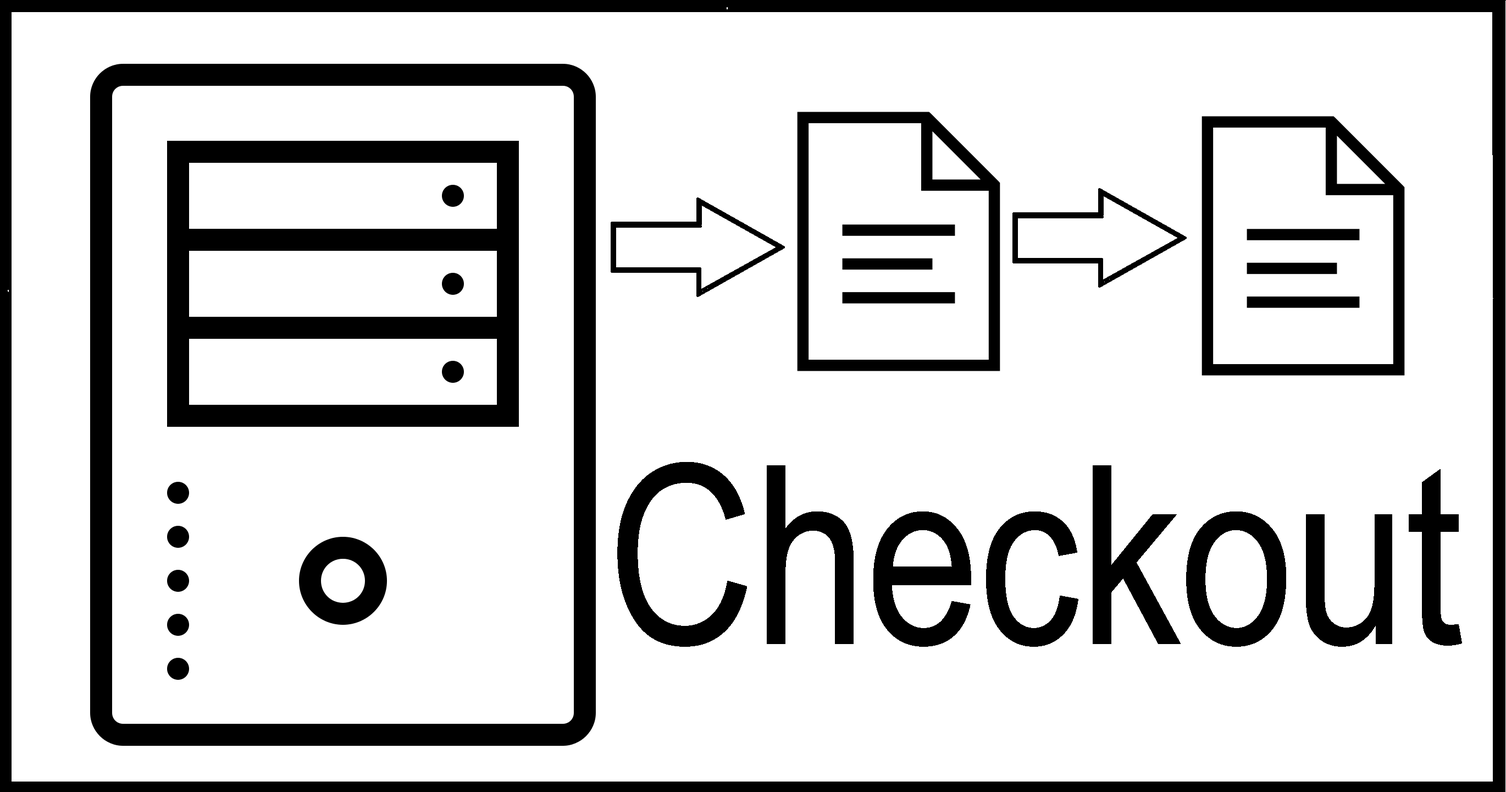
<style>
.page{position:relative;width:1506px;height:792px;background:#ffffff}
.page>*{position:absolute;margin:0}
.t1{font:249.1px "ArialNarrow";letter-spacing:-0.005em;color:#000000}
</style>
<div class="page">
<p class="t1" style="left:617px;top:462px;width:845px;height:184px">Checkout</p>
</div>
